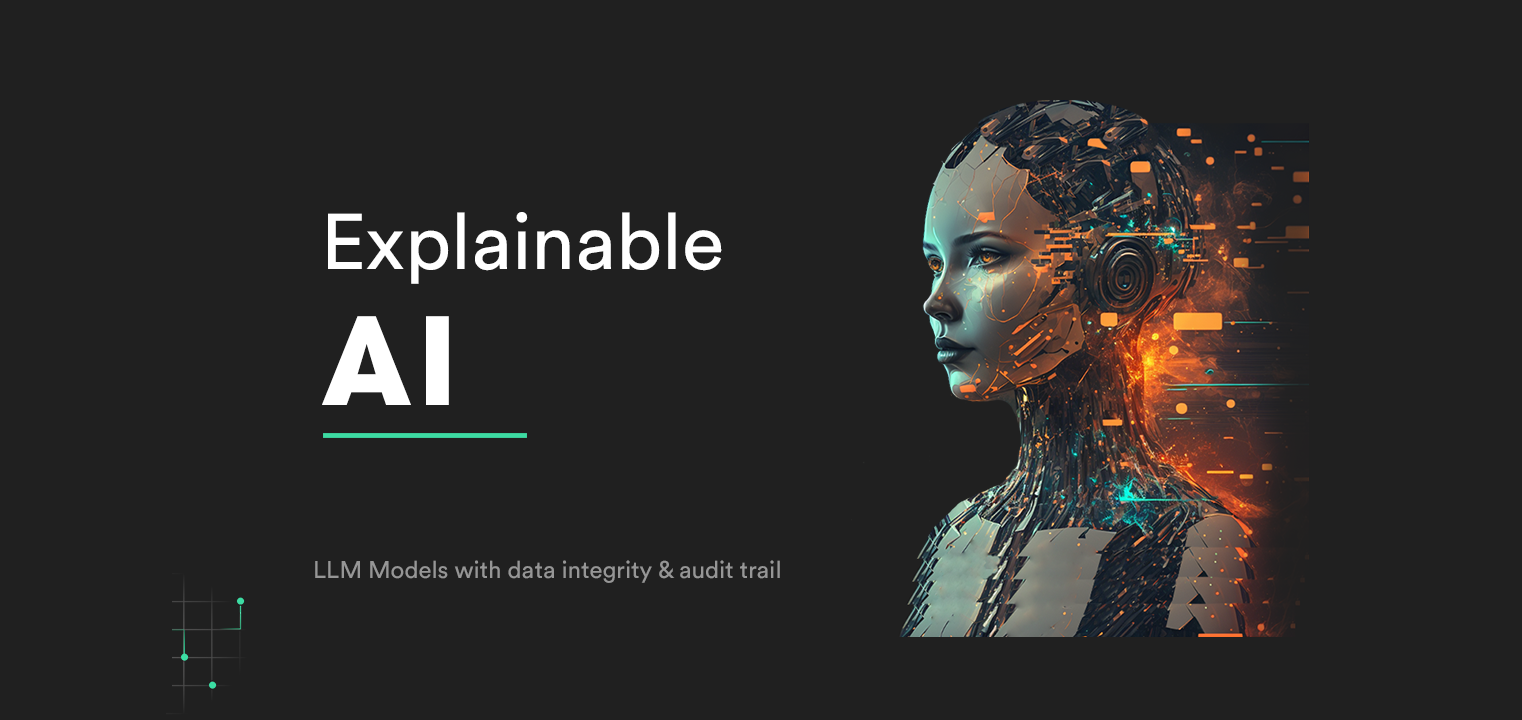
<style>
.page{position:relative;width:1522px;height:720px;background:#202020}
.page>*{position:absolute;margin:0}
.t1{font:78px "CircularStd-Book";color:#ffffff}
.t2{font:120px "AvantGardeGothicITCW02Bd";letter-spacing:0.05em;color:#ffffff}
.t3{font:24px "CircularStd-Book";color:#969696}
</style>
<div class="page">
<p class="t1" style="left:328px;top:212px;width:394px;height:72px">Explainable</p>
<p class="t2" style="left:322px;top:316px;width:127px;height:89px">AI</p>
<p class="t3" style="left:315px;top:560px;width:465px;height:23px">LLM Models with data integrity &amp; audit trail</p>
</div>
